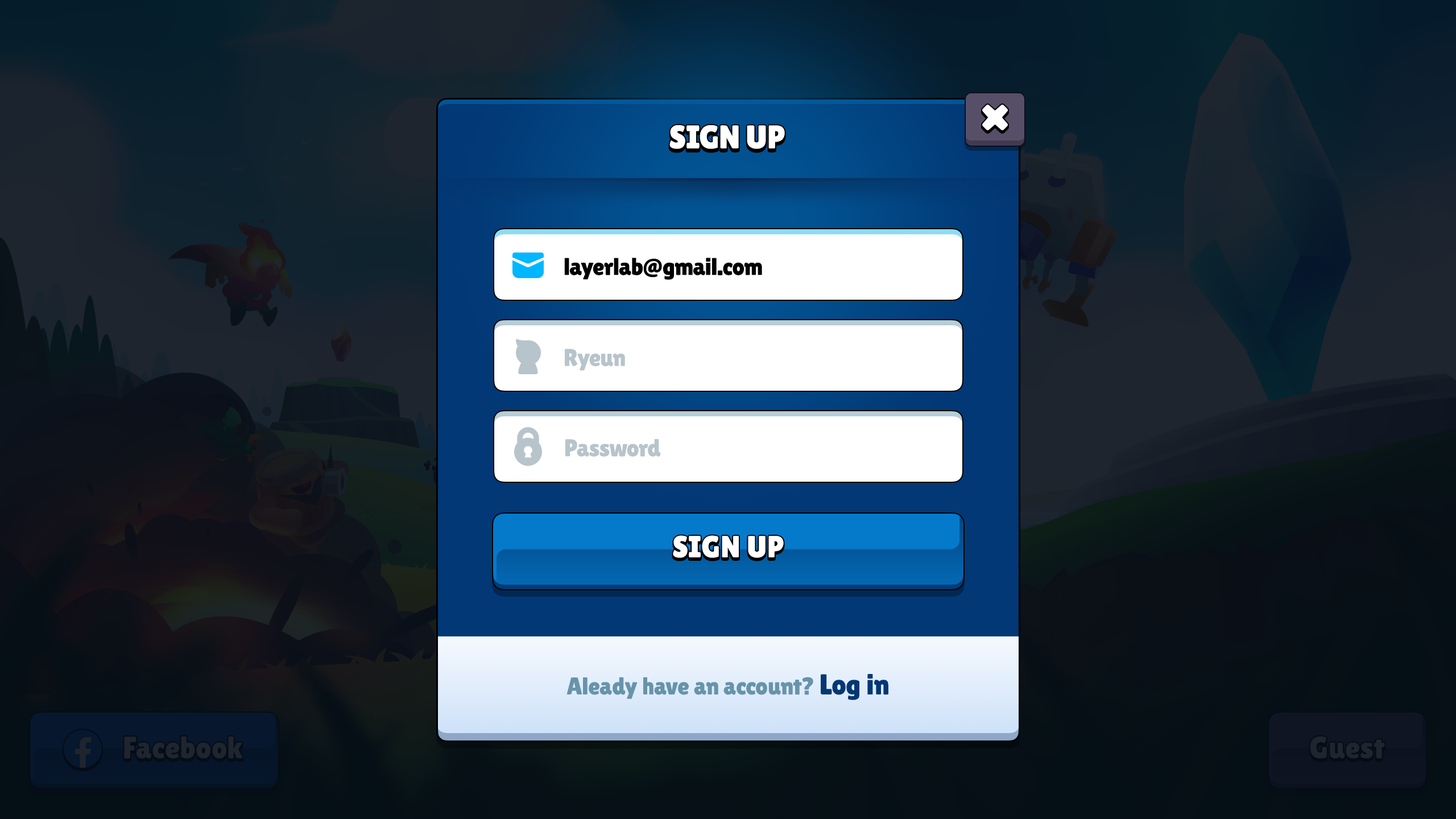
<style>
.page{position:relative;width:1456px;height:819px}
.page>*{position:absolute;margin:0}
.t1{font:33px "LilitaOne";color:#ffffff;text-transform:uppercase}
.t2{font:24.3px "LilitaOne";letter-spacing:-0.025em;color:#000000}
.t3{font:24.3px "LilitaOne";letter-spacing:-0.025em;color:#b7c4cb}
.t4{font:30.7px "LilitaOne";letter-spacing:0.02em;color:#ffffff;text-transform:uppercase}
.t5{font:24.3px "LilitaOne";color:#6794a9}
.t6{font:28.8px "LilitaOne";color:#023875}
</style>
<div class="page">
<p class="t1" style="left:669px;top:125px;width:116px;height:24px">Sign up</p>
<p class="t2" style="left:564px;top:258px;width:198px;height:22px">layerlab@gmail.com</p>
<p class="t3" style="left:565px;top:349px;width:60px;height:22px">Ryeun</p>
<p class="t3" style="left:565px;top:439px;width:96px;height:18px">Password</p>
<p class="t4" style="left:673px;top:535px;width:111px;height:23px">sign up</p>
<p class="t5" style="left:566px;top:674px;width:322px;height:26px">Aleady have an account? <span class="t6">Log in</span></p>
</div>
